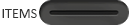
<style>
.page{position:relative;width:129px;height:25px;background:#ffffff}
.page>*{position:absolute;margin:0}
.t1{font:14px "Calibri";color:#333333}
</style>
<div class="page">
<p class="t1" style="left:2px;top:9px;width:35px;height:9px">ITEMS</p>
</div>
